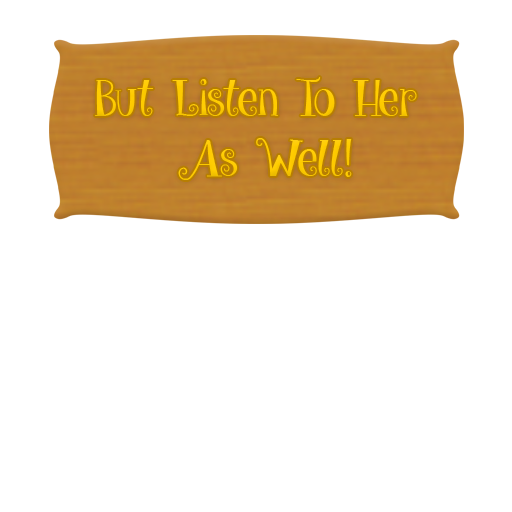
<style>
.page{position:relative;width:512px;height:512px;background:#ffffff}
.page>*{position:absolute;margin:0}
.t1{font:50px "give_me_some_sugar";color:#ffcc00}
</style>
<div class="page">
<p class="t1" style="left:95px;top:77px;width:322px;height:103px;text-align:center">But Listen To Her <br>As Well!</p>
</div>
